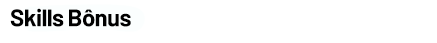
<style>
.page{position:relative;width:437px;height:43px;background:#ffffff}
.page>*{position:absolute;margin:0}
.t1{font:24px "Barlow-Bold";letter-spacing:-0.025em;color:#000000}
</style>
<div class="page">
<p class="t1" style="left:10px;top:8px;width:121px;height:19px">Skills Bônus</p>
</div>
